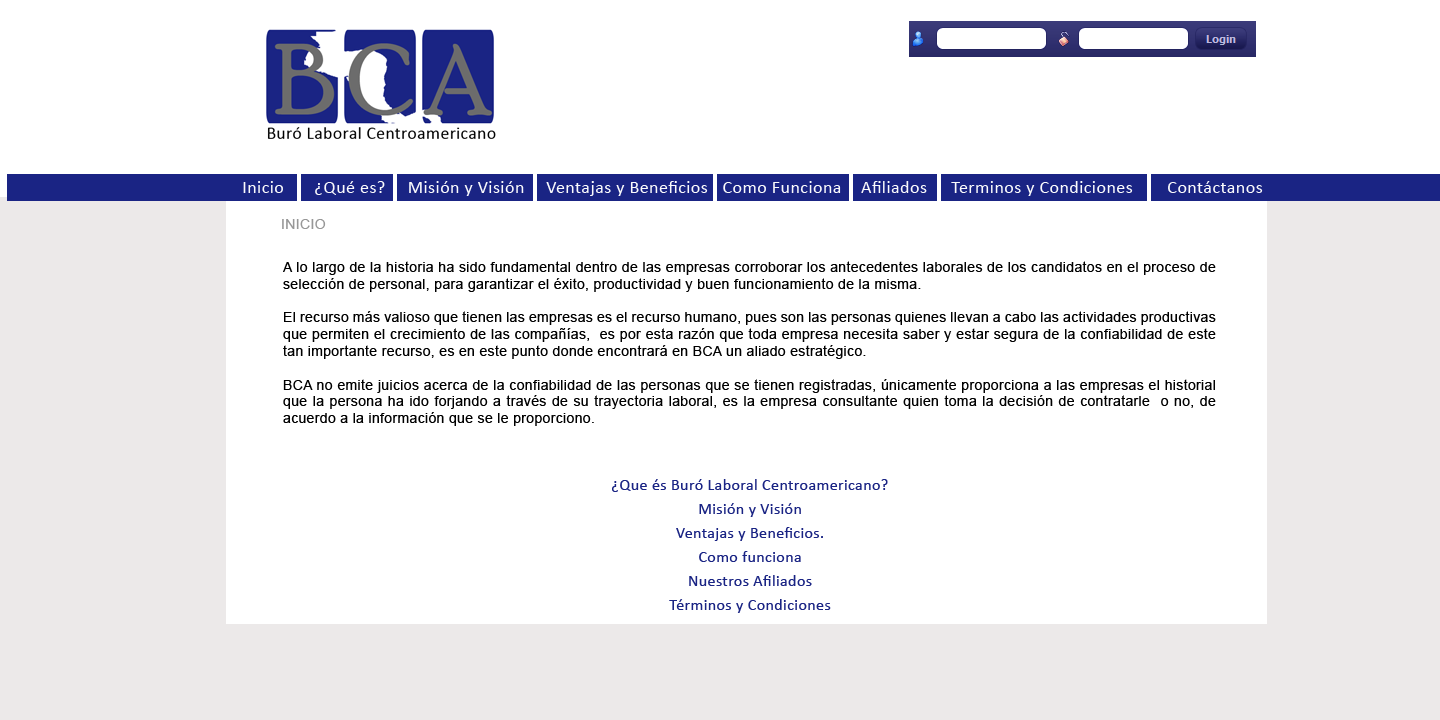
<style>
.page{position:relative;width:1440px;height:720px;background:#ffffff}
.page>*{position:absolute;margin:0}
.t1{font:18px "Calibri";letter-spacing:0.025em;color:#fafafc}
.t2{font:14px "ArialMT";letter-spacing:0.025em;color:#979797}
.t3{font:14px "ArialMT";letter-spacing:0.025em;color:#000000}
.t4{font:16px/24px "Calibri";letter-spacing:0.025em;color:#1a2484}
</style>
<div class="page">
<p class="t1" style="left:243px;top:181px;width:40px;height:12px">Inicio</p>
<p class="t1" style="left:315px;top:181px;width:70px;height:14px">¿Qué es?</p>
<p class="t1" style="left:409px;top:181px;width:115px;height:15px">Misión y Visión</p>
<p class="t1" style="left:546px;top:181px;width:162px;height:15px">Ventajas y Beneficios</p>
<p class="t1" style="left:723px;top:181px;width:118px;height:12px">Como Funciona</p>
<p class="t1" style="left:861px;top:181px;width:66px;height:12px">Afiliados</p>
<p class="t1" style="left:951px;top:181px;width:182px;height:15px">Terminos y Condiciones</p>
<p class="t1" style="left:1168px;top:181px;width:95px;height:12px">Contáctanos</p>
<p class="t2" style="left:282px;top:219px;width:44px;height:10px">INICIO</p>
<p class="t3" style="left:283px;top:261px;width:933px;height:165px;text-align:justify">A lo largo de la historia ha sido fundamental dentro de las empresas corroborar los antecedentes laborales de los candidatos en el proceso de selección de personal, para garantizar el éxito, productividad y buen funcionamiento de la misma.<br><br>El recurso más valioso que tienen las empresas es el recurso humano, pues son las personas quienes llevan a cabo las actividades productivas que permiten el crecimiento de las compañías,  es por esta razón que toda empresa necesita saber y estar segura de la confiabilidad de este tan importante recurso, es en este punto donde encontrará en BCA un aliado estratégico.<br><br>BCA no emite juicios acerca de la confiabilidad de las personas que se tienen registradas, únicamente proporciona a las empresas el historial que la persona ha ido forjando a través de su trayectoria laboral, es la empresa consultante quien toma la decisión de contratarle  o no, de acuerdo a la información que se le proporciono.</p>
<p class="t4" style="left:612px;top:479px;width:276px;height:134px;text-align:center">¿Que és Buró Laboral Centroamericano?<br>Misión y Visión<br>Ventajas y Beneficios.<br>Como funciona<br>Nuestros Afiliados<br>Términos y Condiciones</p>
</div>
